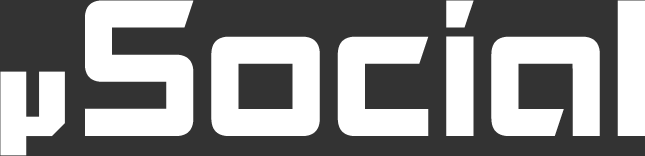
<style>
.page{position:relative;width:645px;height:156px;background:#333333}
.page>*{position:absolute;margin:0}
.t1{font:185px "Akashi";color:#ffffff}
.t2{font:206px "ProLamina-2";color:#ffffff}
</style>
<div class="page">
<p class="t1" style="left:84px;top:0px;width:561px;height:136px">Social</p>
<p class="t2" style="left:0px;top:71px;width:65px;height:85px">µ</p>
</div>
